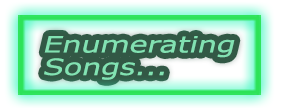
<style>
.page{position:relative;width:282px;height:108px}
.page>*{position:absolute;margin:0}
.t1{font:22.5px/22.5px "MSReferenceSansSerif";color:#82e2b2;font-style:italic;scale:1.33 1}
</style>
<div class="page">
<p class="t1" style="left:44px;top:36px;width:191px;height:44px">Enumerating<br>Songs...</p>
</div>
